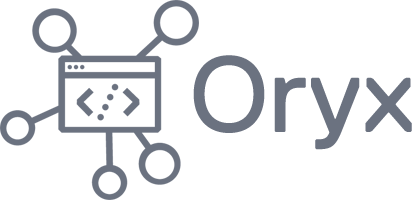
<style>
.page{position:relative;width:412px;height:200px;background:#ffffff}
.page>*{position:absolute;margin:0}
.t1{font:107.8px "ReplicaStd";color:#6b7280}
</style>
<div class="page">
<p class="t1" style="left:193px;top:55px;width:219px;height:95px">Oryx</p>
</div>
